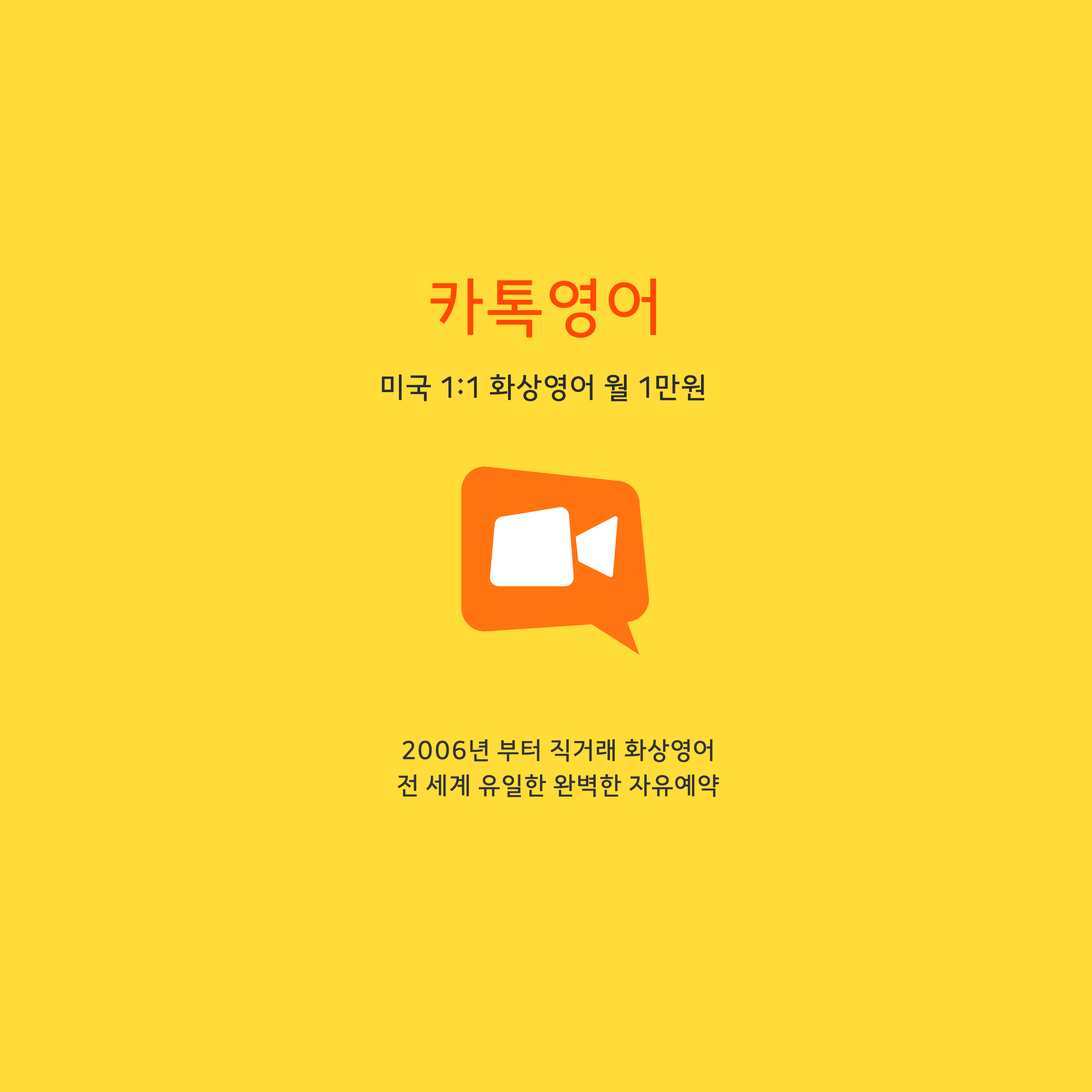
<style>
.page{position:relative;width:1092px;height:1092px;background:#ffdc38}
.page>*{position:absolute;margin:0}
.t1{font:67.1px "KakaoOTFRegular";letter-spacing:0.05em;color:#ff4800}
.t2{font:30.1px "KakaoOTFRegular";letter-spacing:0.05em;color:#2c2c2c}
.t3{font:25.8px/35.2px "KakaoOTFRegular";letter-spacing:0.05em;color:#333333}
</style>
<div class="page">
<p class="t1" style="left:430px;top:278px;width:226px;height:60px">카톡영어</p>
<p class="t2" style="left:382px;top:374px;width:322px;height:27px">미국 1:1 화상영어 월 1만원</p>
<p class="t3" style="left:398px;top:739px;width:321px;height:58px;text-align:center">2006년 부터 직거래 화상영어<br>전 세계 유일한 완벽한 자유예약</p>
</div>
